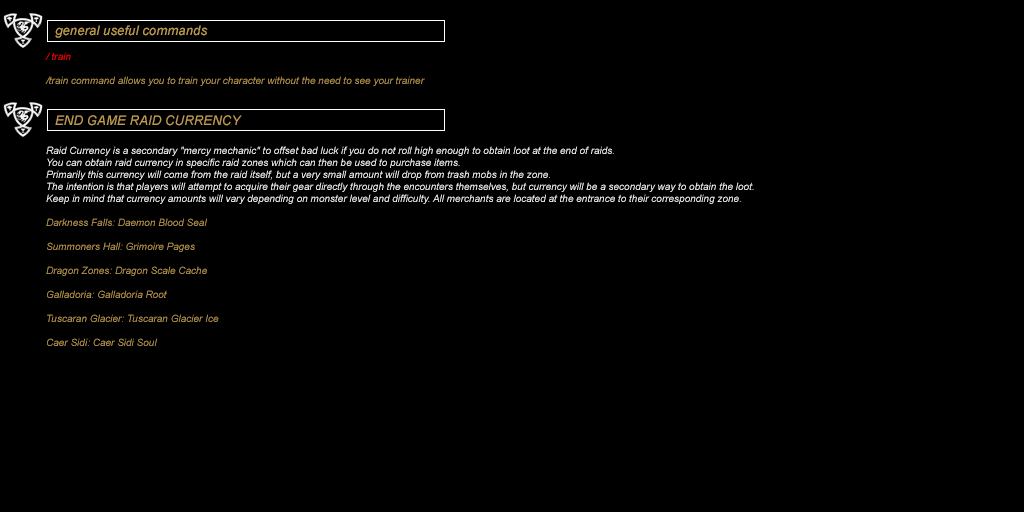
<style>
.page{position:relative;width:1024px;height:512px;background:#000000}
.page>*{position:absolute;margin:0}
.t1{font:13.3px "Arial-ItalicMT";color:#be9b53}
.t2{font:10px "Arial-ItalicMT";color:#be9b53}
.t3{font:10px "Arial-ItalicMT";color:#ff0000}
.t4{font:10px "Arial-ItalicMT";color:#ffffff}
</style>
<div class="page">
<p class="t1" style="left:55px;top:25px;width:153px;height:13px">general useful commands</p>
<p class="t2" style="left:45px;top:52px;width:380px;height:34px"><span class="t3">/ train<br></span><br>/train command allows you to train your character without the need to see your trainer</p>
<p class="t1" style="left:55px;top:115px;width:187px;height:11px">END GAME RAID CURRENCY</p>
<p class="t4" style="left:46px;top:146px;width:708px;height:200px">Raid Currency is a secondary "mercy mechanic" to offset bad luck if you do not roll high enough to obtain loot at the end of raids. <br>You can obtain raid currency in specific raid zones which can then be used to purchase items. <br>Primarily this currency will come from the raid itself, but a very small amount will drop from trash mobs in the zone. <br>The intention is that players will attempt to acquire their gear directly through the encounters themselves, but currency will be a secondary way to obtain the loot. <br>Keep in mind that currency amounts will vary depending on monster level and difficulty. All merchants are located at the entrance to their corresponding zone.<br><br><span class="t2">Darkness Falls: Daemon Blood Seal<br><br>Summoners Hall: Grimoire Pages<br><br>Dragon Zones: Dragon Scale Cache<br><br>Galladoria: Galladoria Root<br><br>Tuscaran Glacier: Tuscaran Glacier Ice<br><br>Caer Sidi: Caer Sidi Soul</span></p>
</div>
